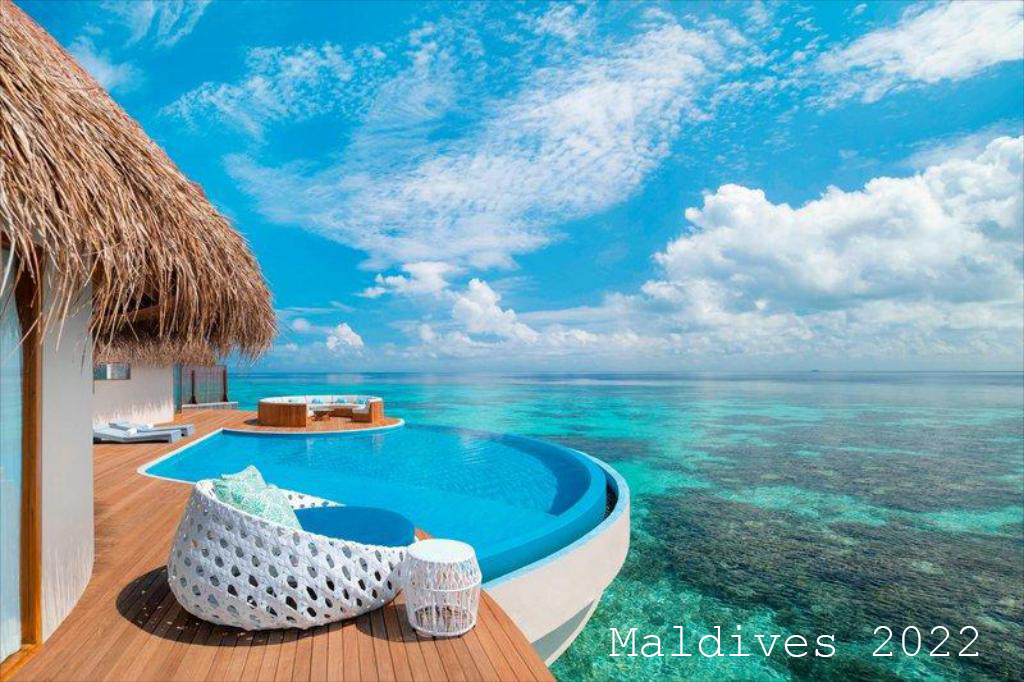
<style>
.page{position:relative;width:1024px;height:682px}
.page>*{position:absolute;margin:0}
.t1{font:48px "CourierNewPSMT";color:#fdfdfd}
</style>
<div class="page">
<p class="t1" style="left:609px;top:625px;width:370px;height:32px">Maldives 2022</p>
</div>
